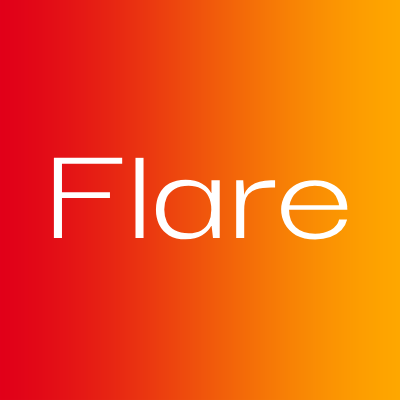
<style>
.page{position:relative;width:400px;height:400px}
.page>*{position:absolute;margin:0}
.t1{font:142.4px "DarkerGrotesqueLight-Regular";color:#ffffff;scale:1.25 1}
</style>
<div class="page">
<p class="t1" style="left:53px;top:157px;width:295px;height:83px">Flare</p>
</div>
